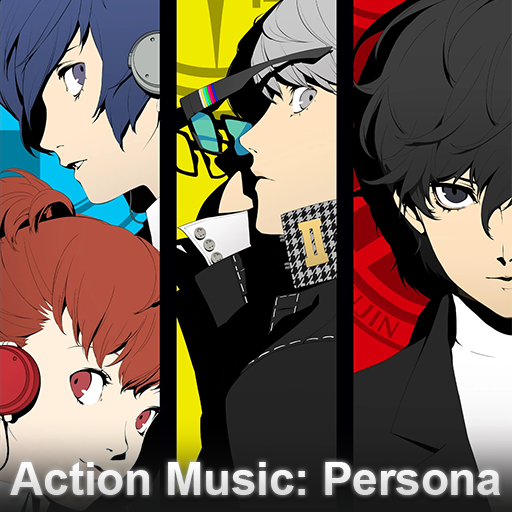
<style>
.page{position:relative;width:512px;height:512px}
.page>*{position:absolute;margin:0}
.t1{font:45.6px "Arial-BoldMT";color:#e7e7e7}
</style>
<div class="page">
<p class="t1" style="left:10px;top:462px;width:490px;height:33px">Action Music: Persona</p>
</div>
